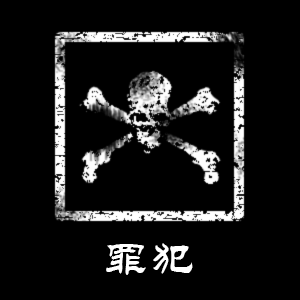
<style>
.page{position:relative;width:300px;height:300px;background:#000000}
.page>*{position:absolute;margin:0}
.t1{font:45.8px "STLiti";letter-spacing:0.01em;color:#ffffff}
</style>
<div class="page">
<p class="t1" style="left:106px;top:243px;width:87px;height:32px">罪犯</p>
</div>
